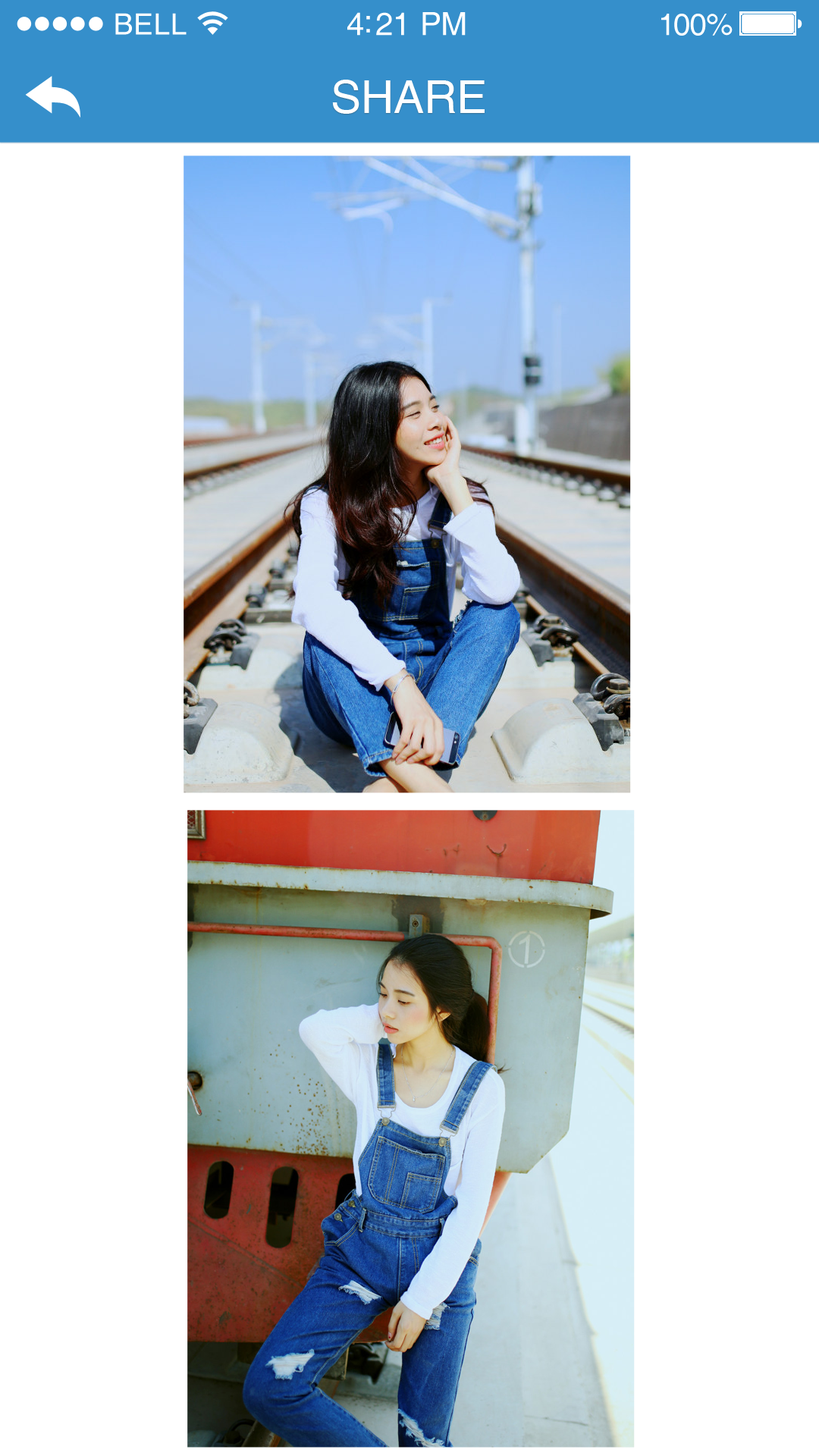
<style>
.page{position:relative;width:819px;height:1456px;background:#ffffff}
.page>*{position:absolute;margin:0}
.t1{font:29.3px "Helvetica";letter-spacing:0.02em;color:#ffffff}
.t2{font:31.8px "Helvetica";letter-spacing:-0.02em;color:#ffffff}
.t3{font:30.6px "Helvetica";letter-spacing:-0.02em;color:#ffffff}
.t4{font:45.5px "Helvetica";color:#ffffff}
</style>
<div class="page">
<p class="t1" style="left:115px;top:13px;width:72px;height:22px">BELL</p>
<p class="t2" style="left:347px;top:12px;width:119px;height:24px">4:21 PM</p>
<p class="t3" style="left:661px;top:14px;width:72px;height:22px">100%</p>
<p class="t4" style="left:332px;top:80px;width:153px;height:34px">SHARE</p>
</div>
